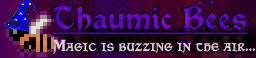
<style>
.page{position:relative;width:256px;height:58px}
.page>*{position:absolute;margin:0}
.t1{font:30px "Vinque-Regular";color:#6700cb;text-decoration:underline}
.t2{font:15px "Vinque-Regular";color:#d1ccd0;font-variant:small-caps}
</style>
<div class="page">
<p class="t1" style="left:52px;top:6px;width:196px;height:28px">Thaumic Bees</p>
<p class="t2" style="left:53px;top:39px;width:203px;height:15px">Magic is buzzing in the air...</p>
</div>
